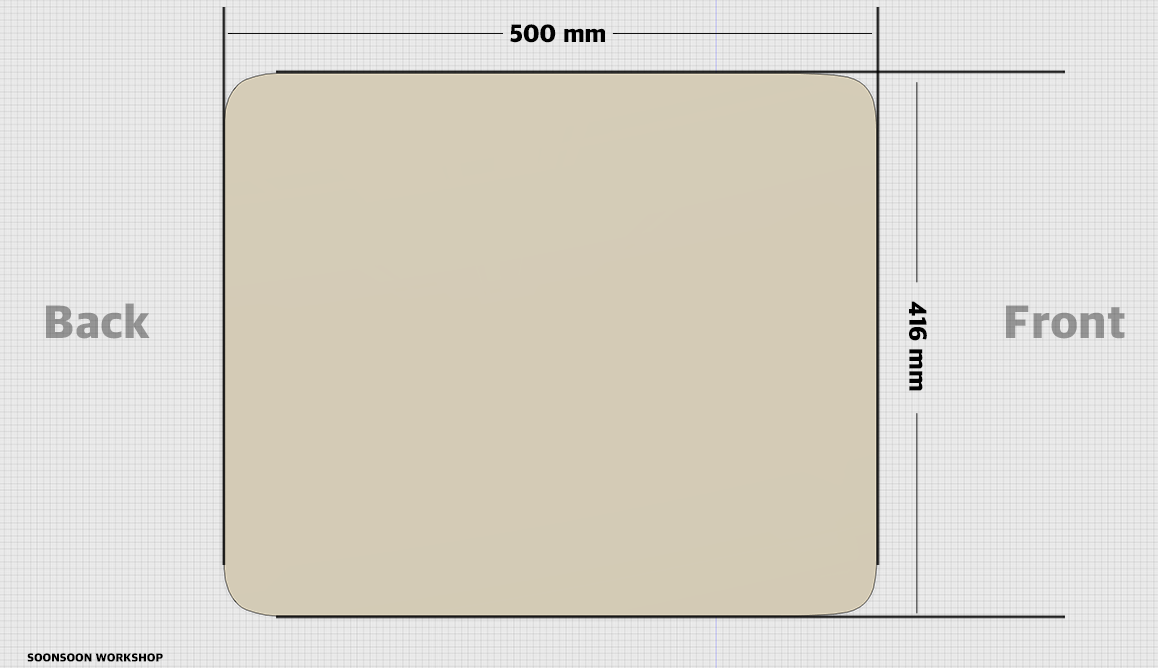
<style>
.page{position:relative;width:1158px;height:668px;background:#d4cbb6}
.page>*{position:absolute;margin:0}
.t1{font:25px "AppleSDGothicNeo-Heavy";color:#000000}
.t2{font:48.2px "AppleSDGothicNeo-Heavy";color:#939393}
.t3{font:12px "AppleSDGothicNeo-Heavy";color:#000000}
</style>
<div class="page">
<p class="t1" style="left:510px;top:24px;width:95px;height:19px">500 mm</p>
<p class="t2" style="left:46px;top:303px;width:104px;height:36px">Back</p>
<p class="t1" style="left:909px;top:301px;width:18px;height:90px;rotate:90deg">416 mm</p>
<p class="t2" style="left:1006px;top:305px;width:119px;height:34px">Front</p>
<p class="t3" style="left:27px;top:653px;width:136px;height:9px">SOONSOON WORKSHOP</p>
</div>
